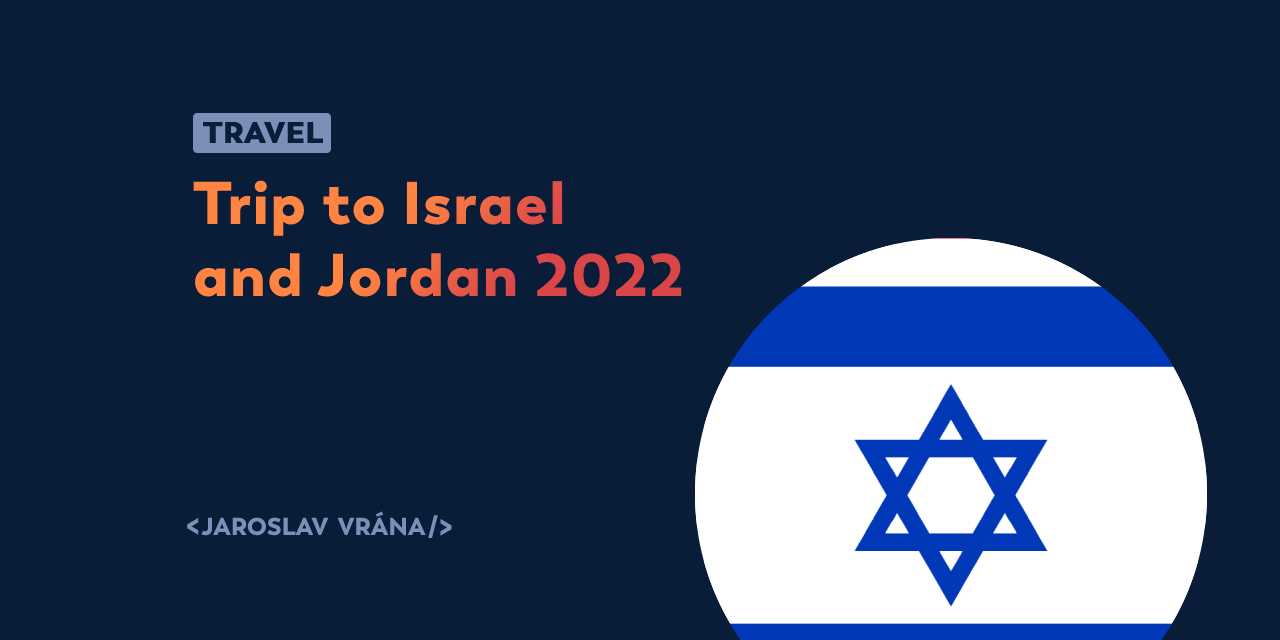
<style>
.page{position:relative;width:1280px;height:640px;background:#091d39}
.page>*{position:absolute;margin:0}
.t1{font:30px "Trenda-Black";color:#0a1d39;font-weight:bold}
.t2{font:60px "Trenda-Black";letter-spacing:0.025em}
.t3{font:52px "Trenda-Black";color:#7b8fb9;font-variant:small-caps}
.t4{font:30px "Trenda-Black";letter-spacing:0.05em;color:#7b8fb9}
.t5{font:52px "Trenda-Black";letter-spacing:0.05em;color:#7b8fb9;font-variant:small-caps}
.t6{font:24px "Trenda-Black";color:#7b8fb9;font-variant:small-caps;font-weight:bold}
.t7{font:30px "Trenda-Black";color:#7b8fb9}
</style>
<div class="page">
<p class="t1" style="left:203px;top:122px;width:120px;height:21px">TRAVEL</p>
<p class="t2" style="left:193px;top:180px;width:489px;height:117px">Trip to Israel <br>and Jordan 2022</p>
<p class="t3" style="left:187px;top:511px;width:265px;height:27px"><span class="t4">&lt;</span>jaroslav vrán<span class="t5">a</span><span class="t6">/</span><span class="t7">&gt;</span></p>
</div>
